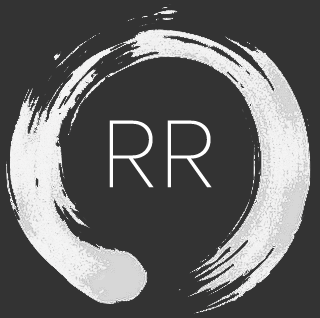
<style>
.page{position:relative;width:320px;height:318px;background:#333333}
.page>*{position:absolute;margin:0}
.t1{font:99.9px "ProximaNovaT-Thin";color:#ffffff}
</style>
<div class="page">
<p class="t1" style="left:109px;top:120px;width:103px;height:68px">RR</p>
</div>
